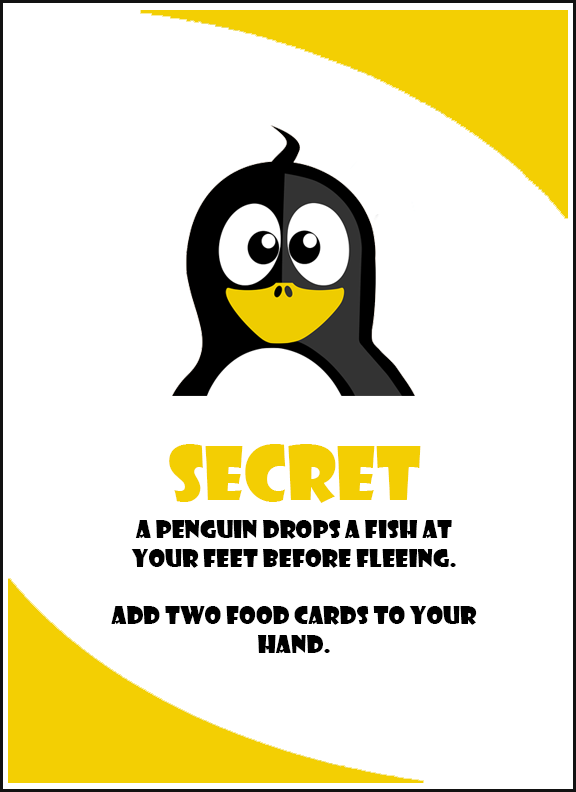
<style>
.page{position:relative;width:576px;height:792px;background:#ffffff}
.page>*{position:absolute;margin:0}
.t1{font:72px "ShowcardGothic-Reg";color:#f3ce03}
.t2{font:24px "ShowcardGothic-Reg";color:#000000}
</style>
<div class="page">
<p class="t1" style="left:169px;top:444px;width:252px;height:59px">SECRET</p>
<p class="t2" style="left:111px;top:520px;width:366px;height:134px;text-align:center">A penguin drops a fish at your feet before fleeing.<br><br>Add two food cards to your hand.</p>
</div>
